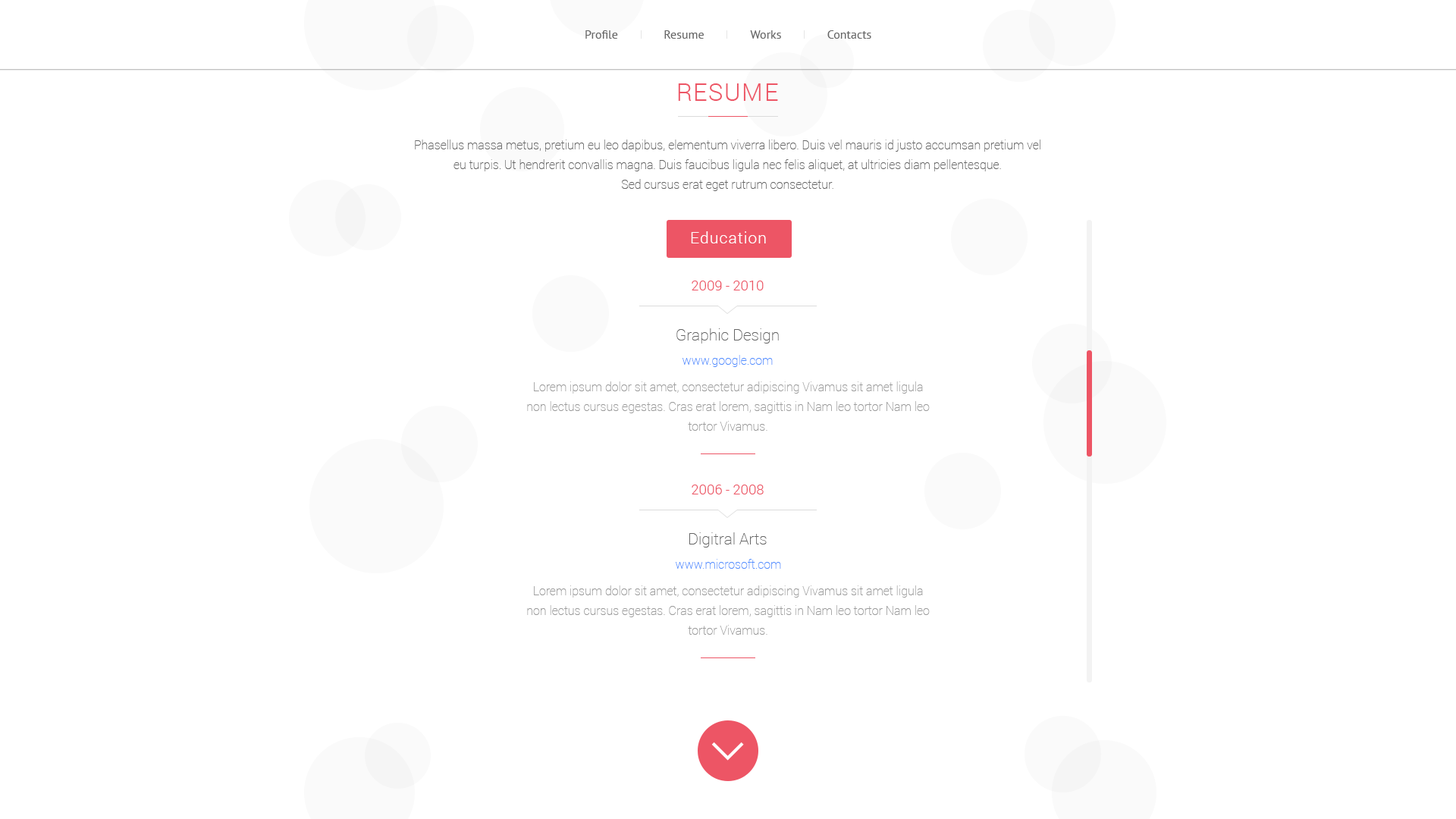
<style>
.page{position:relative;width:1456px;height:819px;background:#ffffff}
.page>*{position:absolute;margin:0}
.t1{font:12.1px "PTSans-Regular";color:#666666}
.t2{font:24.3px "Roboto-Light";letter-spacing:0.05em;color:#ed5565;text-transform:uppercase}
.t3{font:12.1px/19.7px "Roboto-Thin";color:#666666}
.t4{font:15.9px "Roboto-Light";letter-spacing:0.05em;color:#ffffff}
.t5{font:13.6px "Roboto-Light";color:#ed5565}
.t6{font:15.9px "Roboto-Thin";color:#666666}
.t7{font:12.1px "Roboto-Thin";color:#5490ff}
.t8{font:12.1px/19.7px "Roboto-Thin";color:#9c9c9c}
</style>
<div class="page">
<p class="t1" style="left:585px;top:30px;width:33px;height:9px">Profile</p>
<p class="t1" style="left:664px;top:30px;width:40px;height:9px">Resume</p>
<p class="t1" style="left:750px;top:30px;width:31px;height:9px">Works</p>
<p class="t1" style="left:827px;top:30px;width:44px;height:9px">Contacts</p>
<p class="t2" style="left:678px;top:83px;width:100px;height:18px">Resume</p>
<p class="t3" style="left:415px;top:140px;width:625px;height:51px;text-align:center">Phasellus massa metus, pretium eu leo dapibus, elementum viverra libero. Duis vel mauris id justo accumsan pretium vel eu turpis. Ut hendrerit convallis magna. Duis faucibus ligula nec felis aliquet, at ultricies diam pellentesque.<br>Sed cursus erat eget rutrum consectetur.</p>
<p class="t4" style="left:691px;top:231px;width:75px;height:12px">Education</p>
<p class="t5" style="left:692px;top:281px;width:72px;height:9px">2009 - 2010</p>
<p class="t6" style="left:676px;top:328px;width:103px;height:16px">Graphic Design</p>
<p class="t7" style="left:682px;top:355px;width:91px;height:12px">www.google.com</p>
<p class="t8" style="left:527px;top:381px;width:403px;height:50px;text-align:center">Lorem ipsum dolor sit amet, consectetur adipiscing Vivamus sit amet ligula non lectus cursus egestas. Cras erat lorem, sagittis in Nam leo tortor Nam leo tortor Vivamus.</p>
<p class="t5" style="left:692px;top:485px;width:72px;height:9px">2006 - 2008</p>
<p class="t6" style="left:689px;top:532px;width:78px;height:16px">Digitral Arts</p>
<p class="t7" style="left:676px;top:559px;width:105px;height:10px">www.microsoft.com</p>
<p class="t8" style="left:527px;top:585px;width:403px;height:50px;text-align:center">Lorem ipsum dolor sit amet, consectetur adipiscing Vivamus sit amet ligula non lectus cursus egestas. Cras erat lorem, sagittis in Nam leo tortor Nam leo tortor Vivamus.</p>
</div>
